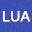
<style>
.page{position:relative;width:32px;height:32px}
.page>*{position:absolute;margin:0}
.t1{font:12.7px "ArialMT";color:#ffffff;font-weight:bold;scale:1.09 1}
</style>
<div class="page">
<p class="t1" style="left:2px;top:11px;width:28px;height:11px">LUA</p>
</div>
